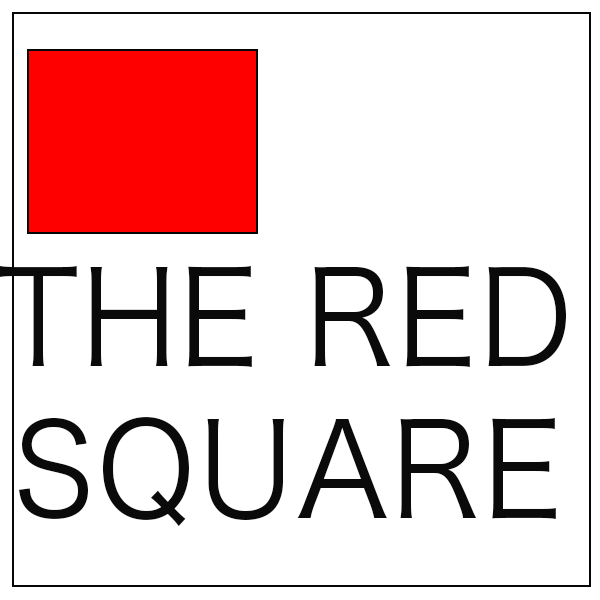
<style>
.page{position:relative;width:600px;height:600px;background:#ffffff}
.page>*{position:absolute;margin:0}
.t1{font:130px "HiraKakuPro-W3";letter-spacing:0.02em;color:#0a0a0a;scale:0.95 1}
</style>
<div class="page">
<p class="t1" style="left:0px;top:266px;width:566px;height:101px">THE RED</p>
<p class="t1" style="left:19px;top:417px;width:537px;height:110px">SQUARE</p>
</div>
